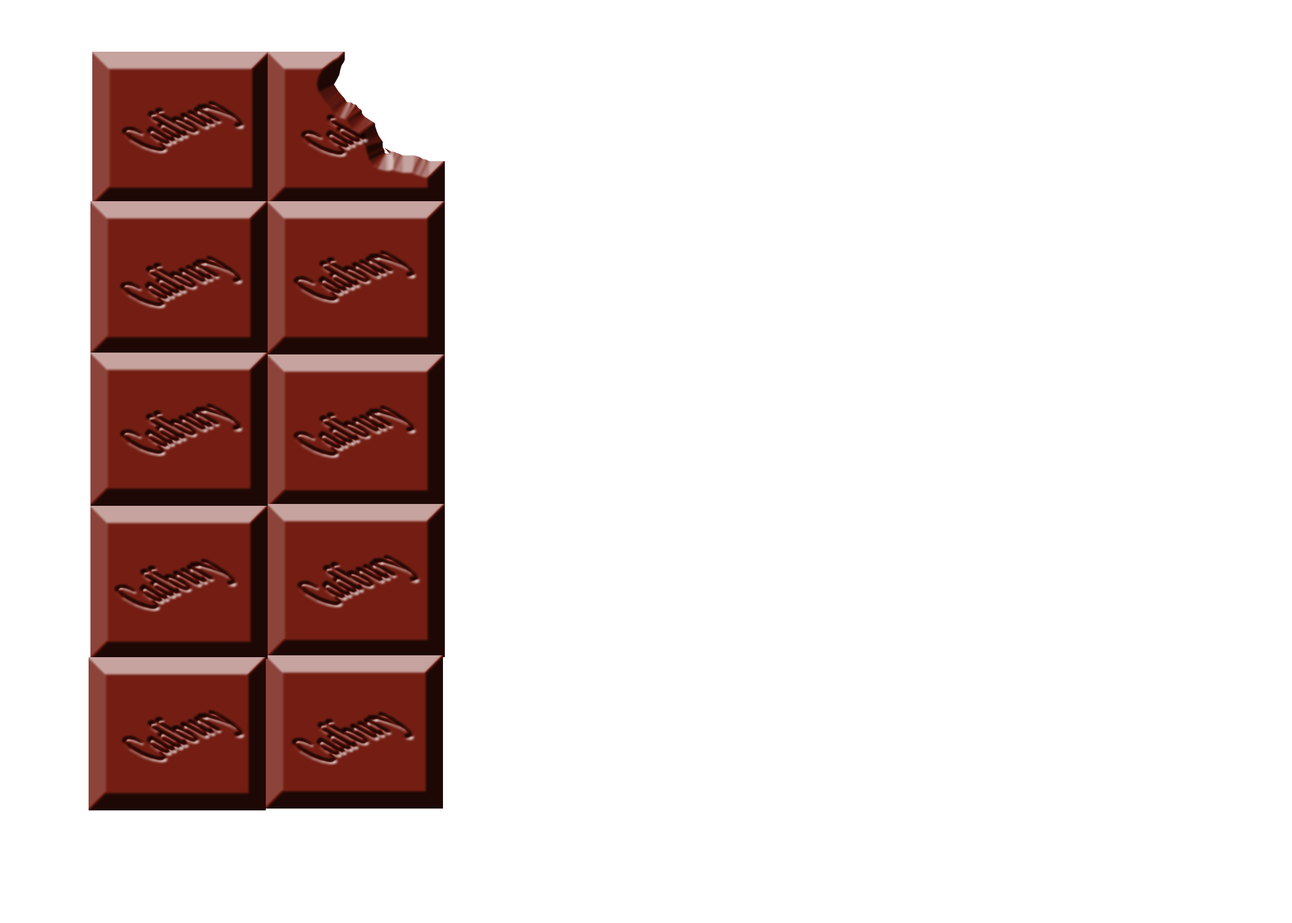
<style>
.page{position:relative;width:1292px;height:923px;background:#ffffff}
.page>*{position:absolute;margin:0}
.t1{font:70.3px "MonotypeCorsiva";letter-spacing:-0.005em;scale:0.46 1}
</style>
<div class="page">
<p class="t1" style="left:124px;top:103px;width:119px;height:48px;rotate:-24deg">Cadbury</p>
<p class="t1" style="left:303px;top:116px;width:64px;height:39px;rotate:-24deg">Cad</p>
<p class="t1" style="left:122px;top:258px;width:119px;height:48px;rotate:-24deg">Cadbury</p>
<p class="t1" style="left:295px;top:252px;width:120px;height:49px;rotate:-24deg">Cadbury</p>
<p class="t1" style="left:122px;top:405px;width:119px;height:49px;rotate:-24deg">Cadbury</p>
<p class="t1" style="left:295px;top:407px;width:120px;height:49px;rotate:-24deg">Cadbury</p>
<p class="t1" style="left:299px;top:557px;width:119px;height:48px;rotate:-24deg">Cadbury</p>
<p class="t1" style="left:116px;top:561px;width:120px;height:48px;rotate:-24deg">Cadbury</p>
<p class="t1" style="left:124px;top:712px;width:119px;height:48px;rotate:-24deg">Cadbury</p>
<p class="t1" style="left:293px;top:714px;width:120px;height:48px;rotate:-24deg">Cadbury</p>
</div>
